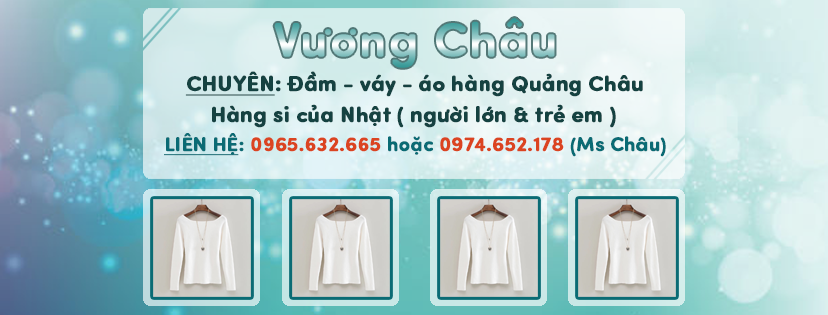
<style>
.page{position:relative;width:828px;height:315px}
.page>*{position:absolute;margin:0}
.t1{font:22px "VL-SofiaProSoft-Bold";color:#154241;font-weight:bold}
.t2{font:22px "VL-SofiaProSoft-Bold";color:#154241;font-weight:bold;text-decoration:underline}
.t3{font:20px "VL-SofiaProSoft-Bold";color:#db4421;font-weight:bold}
.t4{font:20px "VL-SofiaProSoft-Bold";color:#0a6b74;font-weight:bold;text-decoration:underline}
.t5{font:20px "VL-SofiaProSoft-Bold";color:#0a6b74;font-weight:bold}
</style>
<div class="page">
<p class="t1" style="left:185px;top:71px;width:458px;height:26px"><span class="t2">CHUYÊN</span>: Đầm - váy - áo hàng Quảng Châu</p>
<p class="t1" style="left:212px;top:104px;width:404px;height:24px">Hàng si của Nhật ( người lớn &amp; trẻ em )</p>
<p class="t3" style="left:164px;top:133px;width:502px;height:24px"><span class="t4">LIÊN HỆ</span><span class="t5">: </span>0965.632.665<span class="t5"> hoặc </span>0974.652.178<span class="t5"> (Ms Châu)</span></p>
</div>
